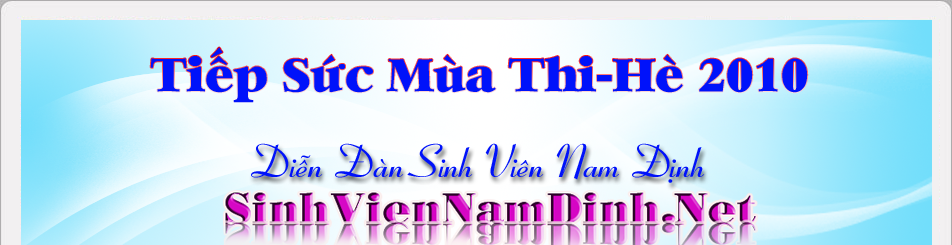
<style>
.page{position:relative;width:952px;height:245px}
.page>*{position:absolute;margin:0}
.t1{font:45px "Heather-Regular";letter-spacing:0.005em;color:#0012fa}
.t2{font:45px "VNI-Coronet-Bold-Italic";letter-spacing:0.005em;color:#0012fa}
</style>
<div class="page">
<p class="t1" style="left:150px;top:47px;width:658px;height:56px">Tieáp Söùc Muøa Thi-Heø 2010</p>
<p class="t2" style="left:251px;top:143px;width:454px;height:40px">Dieãn Ñaøn Sinh Vieân Nam Ñònh</p>
</div>
